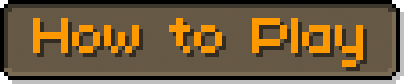
<style>
.page{position:relative;width:404px;height:84px;background:#655845}
.page>*{position:absolute;margin:0}
.t1{font:49px "7px4bus";letter-spacing:-0.05em;color:#ff9900}
</style>
<div class="page">
<p class="t1" style="left:33px;top:18px;width:330px;height:49px">How to Play</p>
</div>
